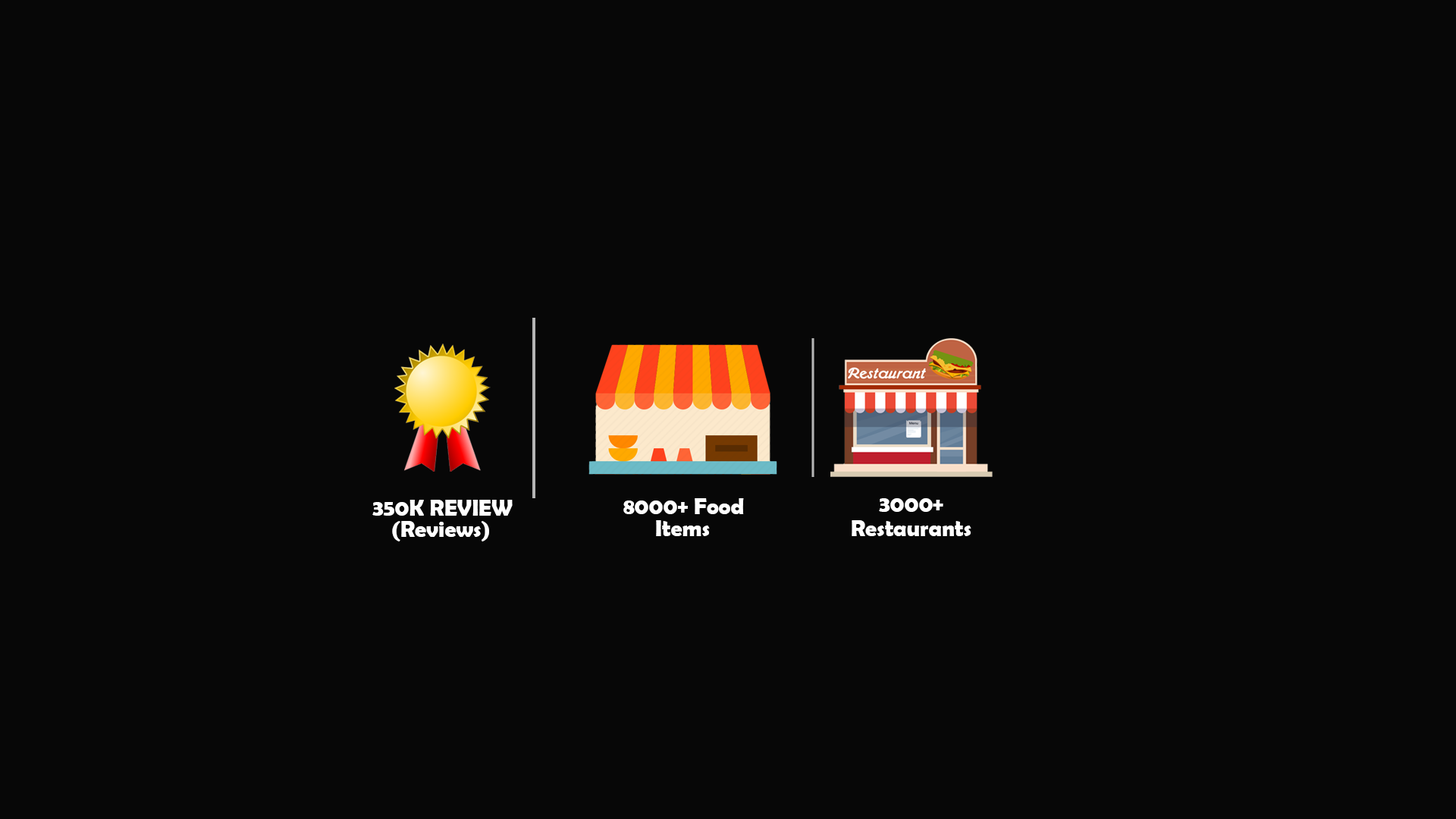
<style>
.page{position:relative;width:1456px;height:819px;background:#070707}
.page>*{position:absolute;margin:0}
.t1{font:22.7px "BerlinSansFBDemi-Bold";color:#ffffff}
</style>
<div class="page">
<p class="t1" style="left:372px;top:500px;width:141px;height:16px">350K REVIEW</p>
<p class="t1" style="left:623px;top:498px;width:121px;height:16px">8000+ Food</p>
<p class="t1" style="left:879px;top:498px;width:64px;height:14px">3000+</p>
<p class="t1" style="left:392px;top:521px;width:97px;height:20px">(Reviews)</p>
<p class="t1" style="left:656px;top:520px;width:54px;height:16px">Items</p>
<p class="t1" style="left:852px;top:520px;width:119px;height:16px">Restaurants</p>
</div>
